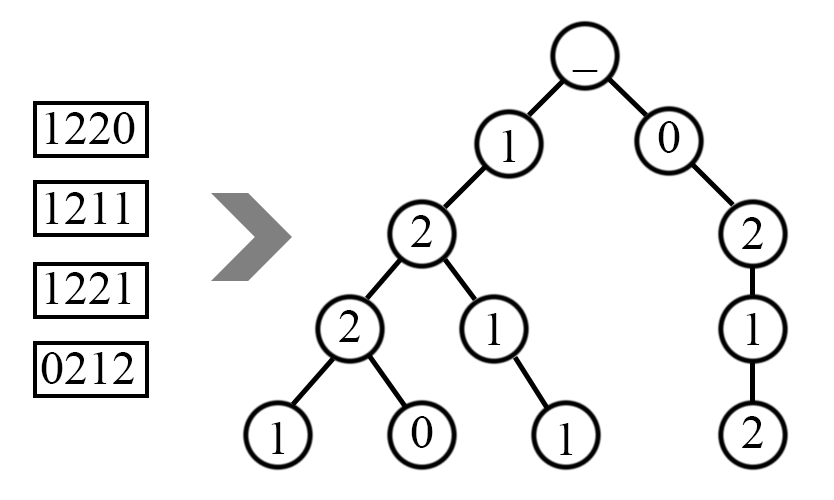
<style>
.page{position:relative;width:834px;height:500px;background:#ffffff}
.page>*{position:absolute;margin:0}
.t1{font:48px "TimesNewRomanPSMT";color:#000000}
.t2{font:48px/80px "TimesNewRomanPSMT";color:#000000}
</style>
<div class="page">
<p class="t1" style="left:572px;top:70px;width:26px;height:2px">_</p>
<p class="t2" style="left:41px;top:112px;width:94px;height:272px;text-align:center">1220<br>1211<br>1221<br>0212</p>
<p class="t1" style="left:658px;top:121px;width:22px;height:32px">0</p>
<p class="t1" style="left:502px;top:130px;width:14px;height:32px">1</p>
<p class="t1" style="left:411px;top:215px;width:21px;height:32px">2</p>
<p class="t1" style="left:742px;top:217px;width:21px;height:32px">2</p>
<p class="t1" style="left:339px;top:310px;width:21px;height:32px">2</p>
<p class="t1" style="left:487px;top:313px;width:14px;height:32px">1</p>
<p class="t1" style="left:746px;top:313px;width:14px;height:32px">1</p>
<p class="t1" style="left:271px;top:422px;width:14px;height:32px">1</p>
<p class="t1" style="left:411px;top:416px;width:22px;height:32px">0</p>
<p class="t1" style="left:559px;top:423px;width:14px;height:32px">1</p>
<p class="t1" style="left:742px;top:416px;width:21px;height:32px">2</p>
</div>
